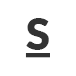
<style>
.page{position:relative;width:76px;height:76px;background:#ffffff}
.page>*{position:absolute;margin:0}
.t1{font:44.1px "Lato-Black";color:#333333;text-decoration:underline}
</style>
<div class="page">
<p class="t1" style="left:25px;top:18px;width:25px;height:40px">S</p>
</div>
